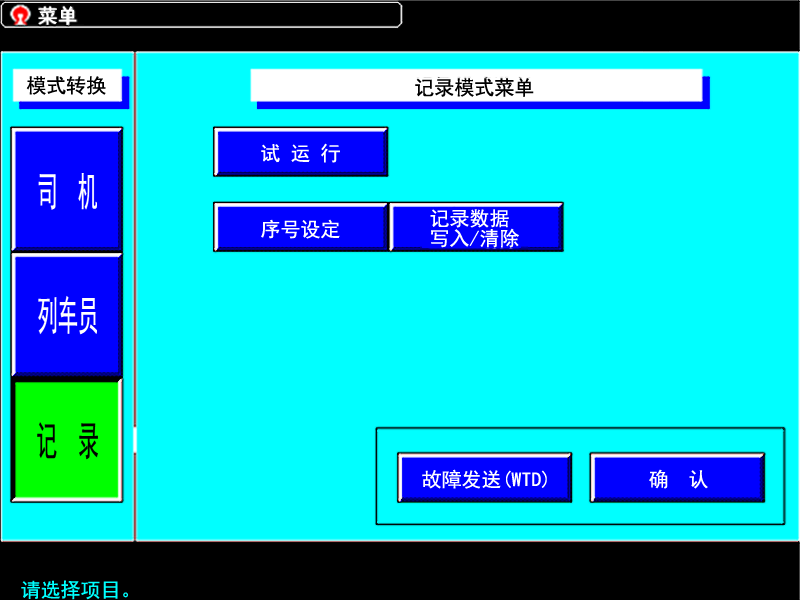
<style>
.page{position:relative;width:800px;height:600px;background:#00ffff}
.page>*{position:absolute;margin:0}
.t1{font:20px "SimHei";color:#ffffff}
.t2{font:20px "SimHei";color:#000000}
.t3{font:20px "SimHei";color:#00ffff}
</style>
<div class="page">
<p class="t1" style="left:38px;top:6px;width:39px;height:19px">菜单</p>
<p class="t2" style="left:26px;top:76px;width:80px;height:19px">模式转换</p>
<p class="t2" style="left:415px;top:78px;width:119px;height:19px">记录模式菜单</p>
<p class="t1" style="left:261px;top:143px;width:79px;height:20px">试 运 行</p>
<p class="t1" style="left:430px;top:209px;width:79px;height:19px">记录数据</p>
<p class="t1" style="left:261px;top:219px;width:79px;height:20px">序号设定</p>
<p class="t1" style="left:431px;top:228px;width:88px;height:20px">写入/清除</p>
<p class="t1" style="left:422px;top:469px;width:125px;height:20px">故障发送(WTD)</p>
<p class="t1" style="left:649px;top:469px;width:59px;height:20px">确  认</p>
<p class="t3" style="left:21px;top:580px;width:107px;height:20px">请选择项目。</p>
</div>
